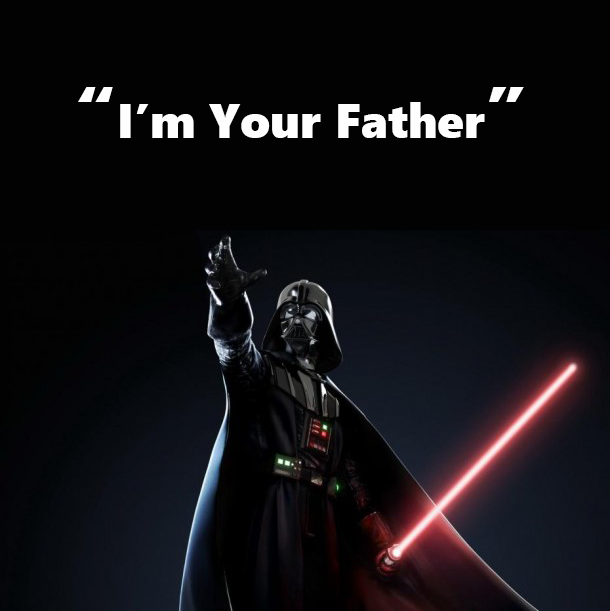
<style>
.page{position:relative;width:610px;height:611px;background:#020202}
.page>*{position:absolute;margin:0}
.t1{font:48px "SegoeUIBlack";color:#fffefe}
.t2{font:72px "SegoeUIBlack";color:#fffefe}
</style>
<div class="page">
<p class="t1" style="left:78px;top:87px;width:446px;height:51px"><span class="t2">“</span>I’m Your Father<span class="t2">”</span></p>
</div>
